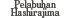
<style>
.page{position:relative;width:70px;height:18px;background:#ffffff}
.page>*{position:absolute;margin:0}
.t1{font:10px/8px "RyuminPro-ExBold";letter-spacing:-0.04em;color:#4c4843;scale:0.9 1}
</style>
<div class="page">
<p class="t1" style="left:10px;top:0px;width:50px;height:18px;text-align:center">Pelabuhan<br>Hashirajima</p>
</div>
